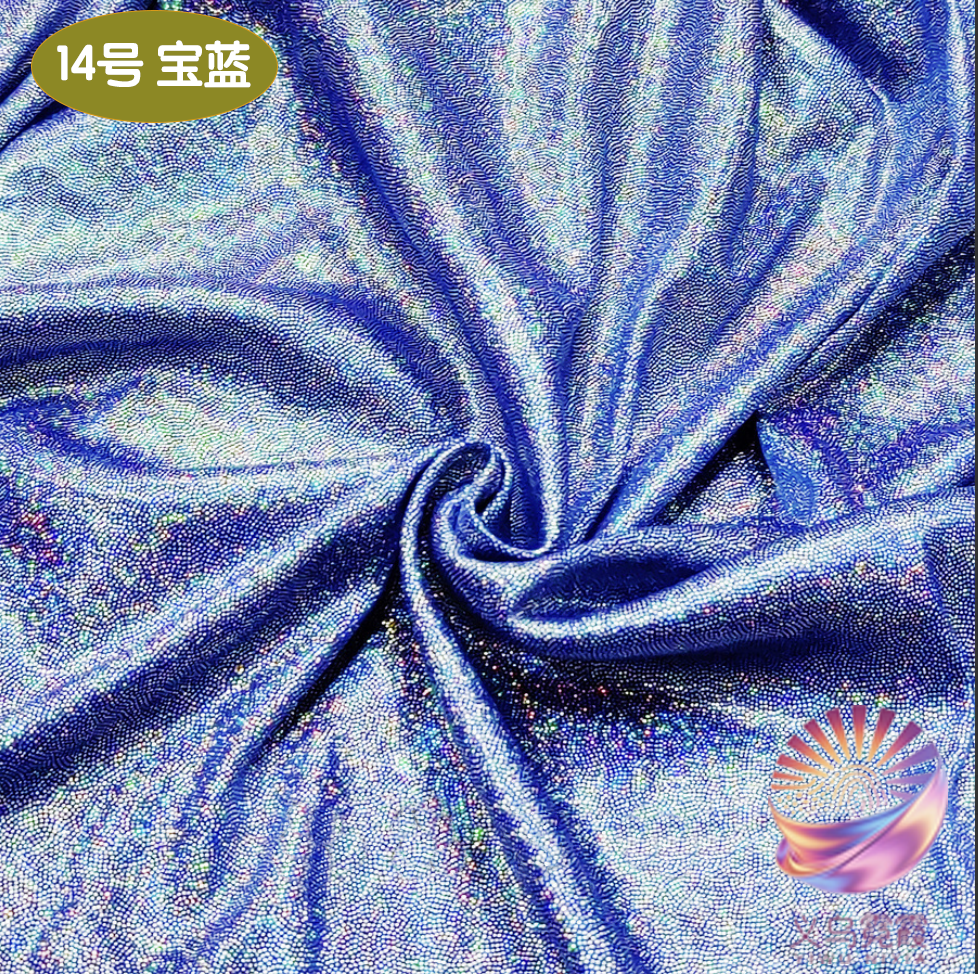
<style>
.page{position:relative;width:978px;height:974px}
.page>*{position:absolute;margin:0}
.t1{font:49.1px "STYuanti-SC-Bold";color:#ffffff;scale:0.97 1}
.t2{font:84.6px "STBaoliSC-Regular";color:#ffffff;scale:0.97 1}
</style>
<div class="page">
<p class="t1" style="left:57px;top:40px;width:194px;height:48px"><span class="t2">         </span>14号 宝蓝</p>
</div>
